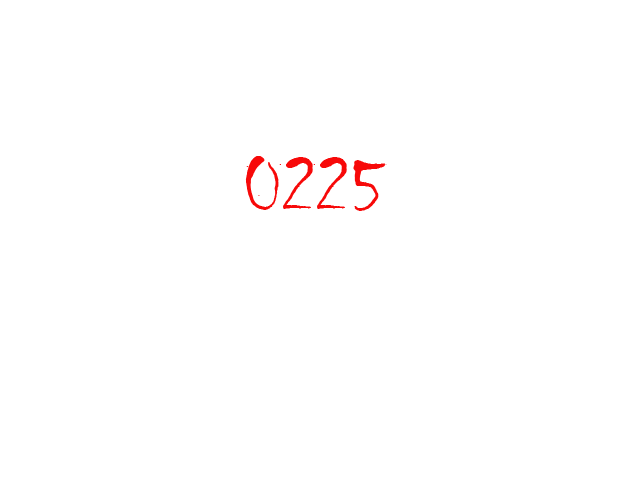
<style>
.page{position:relative;width:630px;height:500px;background:#ffffff}
.page>*{position:absolute;margin:0}
.t1{font:83.3px "Chiller-Regular";color:#f80909}
</style>
<div class="page">
<p class="t1" style="left:245px;top:156px;width:142px;height:55px">0225</p>
</div>
